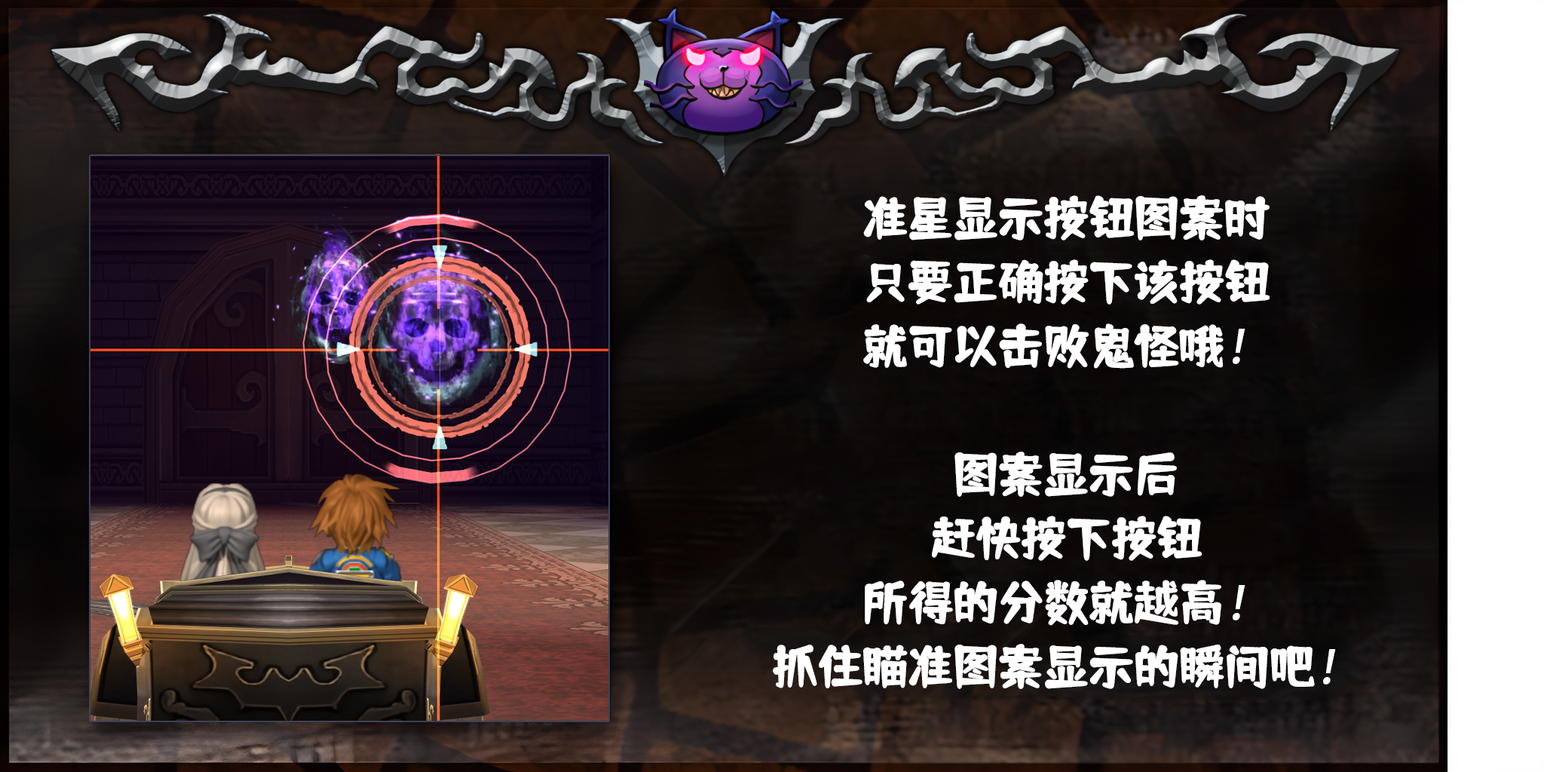
<style>
.page{position:relative;width:1544px;height:772px}
.page>*{position:absolute;margin:0}
.t1{font:45.2px/64.1px "TsangerShuYuanT-W05";color:#ffffff}
.t2{font:45.2px/64.1px "AdobeHeitiStd-Regular";color:#ffffff;font-style:italic}
</style>
<div class="page">
<p class="t1" style="left:773px;top:195px;width:563px;height:494px;text-align:center">准星显示按钮图案时<br>只要正确按下该按钮<br>就可以击败鬼怪哦<span class="t2">！<br></span><br>图案显示后<br>赶快按下按钮<br>所得的分数就越高<span class="t2">！<br></span>抓住瞄准图案显示的瞬间吧<span class="t2">！</span></p>
</div>
